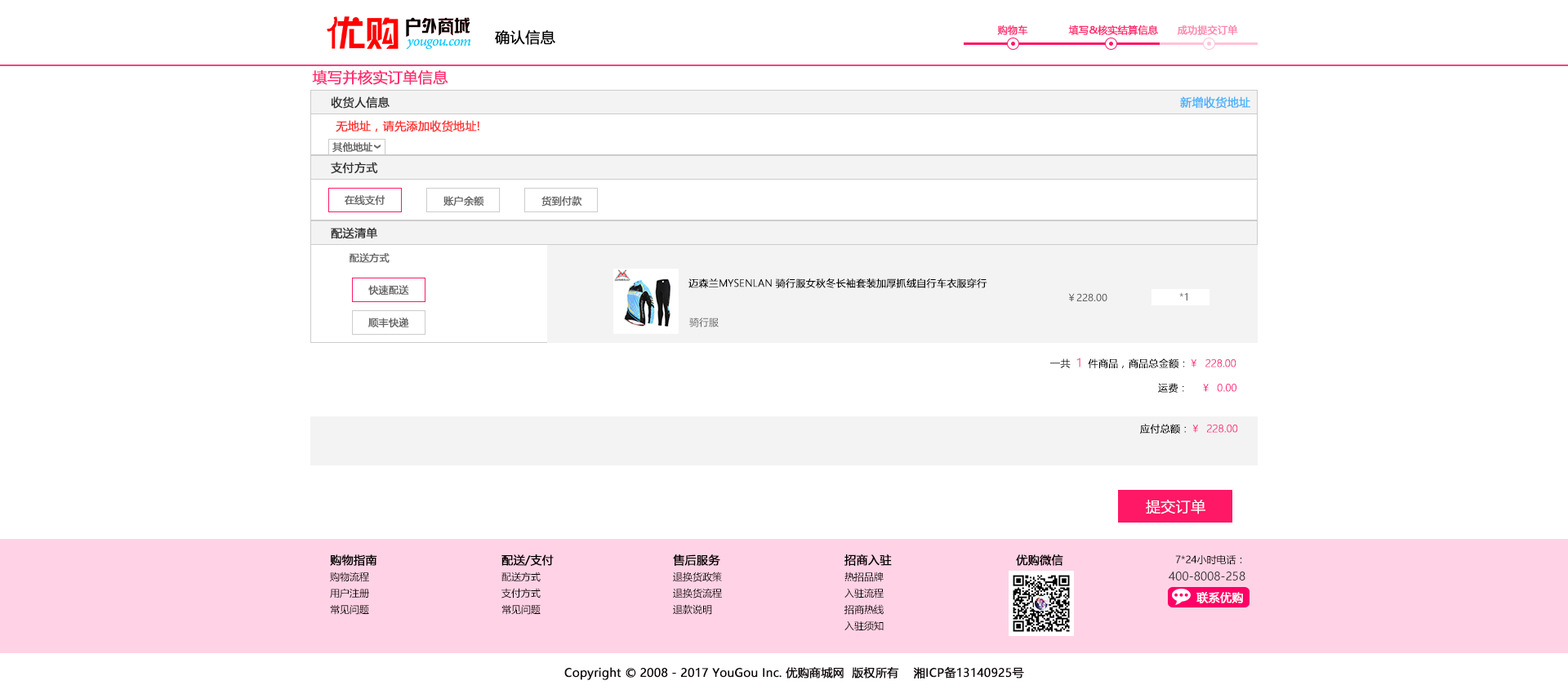
<style>
.page{position:relative;width:1568px;height:694px;background:#ffffff}
.page>*{position:absolute;margin:0}
.t1{font:9.8px "MicrosoftYaHei";color:#ff3679;font-weight:bold}
.t2{font:9.8px "MicrosoftYaHei";color:#ff2b72;font-weight:bold}
.t3{font:9.8px "MicrosoftYaHei";color:#ff86ae;font-weight:bold}
.t4{font:14.7px "MicrosoftYaHei";color:#010000;font-weight:bold}
.t5{font:14.7px "MicrosoftYaHei";color:#ff2f74;font-weight:bold}
.t6{font:11.4px "MicrosoftYaHei";color:#333333;font-weight:bold}
.t7{font:11.4px "MicrosoftYaHei";color:#4ab1fa;font-weight:bold}
.t8{font:11.4px "MicrosoftYaHei";color:#ff3333;font-weight:bold}
.t9{font:9.8px "MicrosoftYaHei";color:#666666;font-weight:bold}
.t10{font:9.8px "MicrosoftYaHeiLight";color:#000000;font-weight:bold}
.t11{font:9.8px "MicrosoftYaHei";color:#666666}
.t12{font:11.4px "MicrosoftYaHeiLight";color:#ff4180;font-weight:bold}
.t13{font:9.8px "MicrosoftYaHeiLight";color:#ff217a;font-weight:bold}
.t14{font:9.8px "MicrosoftYaHeiLight";font-weight:bold}
.t15{font:14.7px "MicrosoftYaHeiLight";color:#fffeff;font-weight:bold}
.t16{font:11.4px "MicrosoftYaHei";color:#040000;font-weight:bold}
.t17{font:9.8px "MicrosoftYaHei";color:#040000}
.t18{font:11.4px "MicrosoftYaHei";color:#323333}
.t19{font:11.4px "MicrosoftYaHei";color:#ffffff;font-weight:bold}
.t20{font:11.4px "MicrosoftYaHei";color:#0e050a;font-weight:bold}
</style>
<div class="page">
<p class="t1" style="left:997px;top:25px;width:31px;height:10px">购物车</p>
<p class="t2" style="left:1068px;top:25px;width:90px;height:10px">填写&amp;核实结算信息</p>
<p class="t3" style="left:1177px;top:24px;width:61px;height:11px">成功提交订单</p>
<p class="t4" style="left:495px;top:30px;width:60px;height:15px">确认信息</p>
<p class="t5" style="left:312px;top:69px;width:136px;height:16px">填写并核实订单信息</p>
<p class="t6" style="left:331px;top:96px;width:59px;height:13px">收货人信息</p>
<p class="t7" style="left:1180px;top:96px;width:70px;height:13px">新增收货地址</p>
<p class="t8" style="left:336px;top:120px;width:143px;height:12px">无地址，请先添加收货地址!</p>
<p class="t9" style="left:332px;top:142px;width:41px;height:11px">其他地址</p>
<p class="t6" style="left:331px;top:162px;width:47px;height:12px">支付方式</p>
<p class="t9" style="left:345px;top:195px;width:40px;height:11px">在线支付</p>
<p class="t9" style="left:443px;top:196px;width:41px;height:11px">账户余额</p>
<p class="t9" style="left:541px;top:196px;width:41px;height:11px">货到付款</p>
<p class="t6" style="left:331px;top:227px;width:46px;height:12px">配送清单</p>
<p class="t9" style="left:350px;top:253px;width:40px;height:10px">配送方式</p>
<p class="t10" style="left:688px;top:278px;width:299px;height:10px">迈森兰MYSENLAN 骑行服女秋冬长袖套装加厚抓绒自行车衣服穿行</p>
<p class="t9" style="left:368px;top:285px;width:41px;height:10px">快速配送</p>
<p class="t11" style="left:1068px;top:293px;width:39px;height:8px">￥228.00</p>
<p class="t11" style="left:1179px;top:292px;width:8px;height:9px">*1</p>
<p class="t9" style="left:368px;top:318px;width:41px;height:9px">顺丰快递</p>
<p class="t11" style="left:689px;top:318px;width:30px;height:9px">骑行服</p>
<p class="t10" style="left:1050px;top:358px;width:186px;height:10px">一共  <span class="t12">1 </span> 件商品，商品总金额：<span class="t13">￥  228.00</span></p>
<p class="t14" style="left:1158px;top:383px;width:78px;height:10px">运费：    ￥  0.00</p>
<p class="t13" style="left:1140px;top:424px;width:98px;height:10px"><span class="t10">应付总额：</span>￥  228.00</p>
<p class="t15" style="left:1146px;top:500px;width:59px;height:14px">提交订单</p>
<p class="t16" style="left:330px;top:555px;width:47px;height:11px">购物指南</p>
<p class="t16" style="left:501px;top:555px;width:53px;height:11px">配送/支付</p>
<p class="t16" style="left:673px;top:555px;width:47px;height:11px">售后服务</p>
<p class="t16" style="left:844px;top:555px;width:48px;height:11px">招商入驻</p>
<p class="t16" style="left:1016px;top:555px;width:47px;height:11px">优购微信</p>
<p class="t17" style="left:1175px;top:555px;width:67px;height:10px">7*24小时电话：</p>
<p class="t17" style="left:330px;top:572px;width:39px;height:10px">购物流程</p>
<p class="t17" style="left:501px;top:572px;width:40px;height:10px">配送方式</p>
<p class="t17" style="left:673px;top:572px;width:49px;height:10px">退换货政策</p>
<p class="t17" style="left:844px;top:572px;width:40px;height:10px">热招品牌</p>
<p class="t18" style="left:1169px;top:572px;width:76px;height:9px">400-8008-258</p>
<p class="t17" style="left:330px;top:588px;width:39px;height:11px">用户注册</p>
<p class="t17" style="left:501px;top:588px;width:40px;height:11px">支付方式</p>
<p class="t17" style="left:673px;top:588px;width:49px;height:11px">退换货流程</p>
<p class="t17" style="left:844px;top:588px;width:40px;height:11px">入驻流程</p>
<p class="t19" style="left:1196px;top:592px;width:47px;height:12px">联系优购</p>
<p class="t17" style="left:330px;top:604px;width:39px;height:11px">常见问题</p>
<p class="t17" style="left:501px;top:604px;width:40px;height:11px">常见问题</p>
<p class="t17" style="left:673px;top:604px;width:39px;height:11px">退款说明</p>
<p class="t17" style="left:844px;top:604px;width:40px;height:11px">招商热线</p>
<p class="t17" style="left:844px;top:621px;width:40px;height:10px">入驻须知</p>
<p class="t20" style="left:564px;top:666px;width:460px;height:14px">Copyright © 2008 - 2017 YouGou Inc. 优购商城网  版权所有    湘ICP备13140925号</p>
</div>
